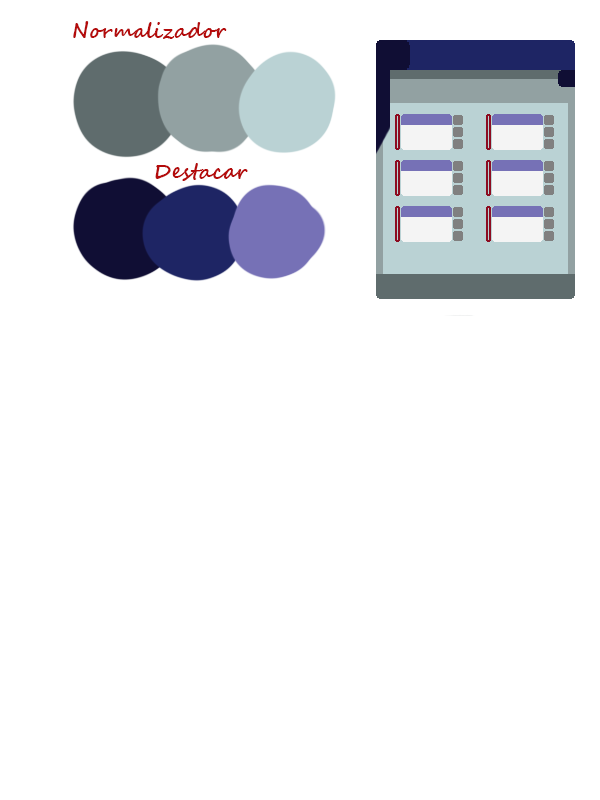
<style>
.page{position:relative;width:600px;height:800px;background:#ffffff}
.page>*{position:absolute;margin:0}
.t1{font:20.8px "SegoeScript-Bold";color:#b40b0b}
</style>
<div class="page">
<p class="t1" style="left:73px;top:21px;width:154px;height:18px">Normalizador</p>
<p class="t1" style="left:155px;top:163px;width:93px;height:18px">Destacar</p>
</div>
